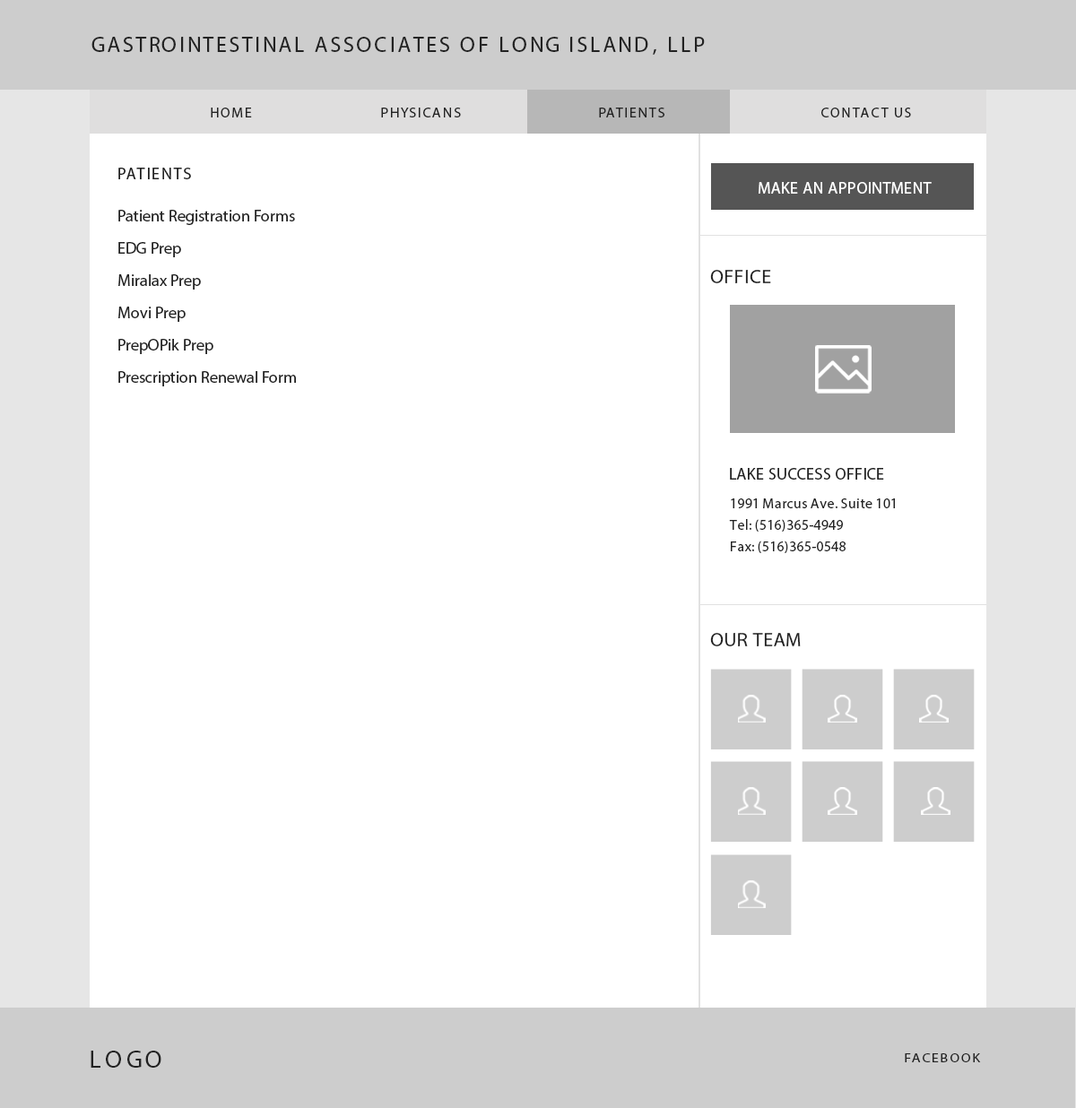
<style>
.page{position:relative;width:1076px;height:1108px;background:#ffffff}
.page>*{position:absolute;margin:0}
.t1{font:21.5px "MyriadPro-Regular";letter-spacing:0.12em;color:#222222;text-transform:uppercase}
.t2{font:14.3px "MyriadPro-Regular";letter-spacing:0.1em;color:#222222;text-transform:uppercase}
.t3{font:16.1px "MyriadPro-Regular";letter-spacing:0.1em;color:#222222;text-transform:uppercase}
.t4{font:16.1px "MyriadPro-Regular";letter-spacing:0.02em;color:#ffffff;text-transform:uppercase}
.t5{font:16.3px/32.3px "MyriadPro-Regular";color:#222222}
.t6{font:19.7px "MyriadPro-Regular";letter-spacing:0.02em;color:#222222;text-transform:uppercase}
.t7{font:16.1px "MyriadPro-Regular";letter-spacing:0.02em;color:#222222;text-transform:uppercase}
.t8{font:14.3px/21.5px "MyriadPro-Regular";letter-spacing:0.02em;color:#222222}
.t9{font:25.1px "MyriadPro-Regular";letter-spacing:0.12em;color:#222222;text-transform:uppercase}
.t10{font:12.1px "MyriadPro-Regular";letter-spacing:0.1em;color:#222222;text-transform:uppercase;scale:1.18 1}
</style>
<div class="page">
<p class="t1" style="left:91px;top:37px;width:614px;height:18px">Gastrointestinal Associates of Long Island, LLP</p>
<p class="t2" style="left:211px;top:108px;width:700px;height:9px">Home             Physicans   Patients   Contact Us</p>
<p class="t3" style="left:118px;top:168px;width:73px;height:11px">PATIENTS</p>
<p class="t4" style="left:759px;top:182px;width:173px;height:12px">MAKE an Appointment</p>
<p class="t5" style="left:118px;top:210px;width:178px;height:176px">Patient Registration Forms<br>EDG Prep<br>Miralax Prep<br>Movi Prep<br>PrepOPik Prep<br>Prescription Renewal Form</p>
<p class="t6" style="left:710px;top:270px;width:61px;height:13px">Office</p>
<p class="t7" style="left:730px;top:468px;width:154px;height:12px">lAKE sUCCESS oFFICE</p>
<p class="t8" style="left:729px;top:499px;width:166px;height:54px">1991 Marcus Ave. Suite 101<br>Tel: (516)365-4949<br>Fax: (516)365-0548</p>
<p class="t6" style="left:710px;top:633px;width:91px;height:13px">Our Team</p>
<p class="t9" style="left:91px;top:1051px;width:70px;height:17px">LOGO</p>
<p class="t10" style="left:905px;top:1054px;width:76px;height:9px">Facebook</p>
</div>
